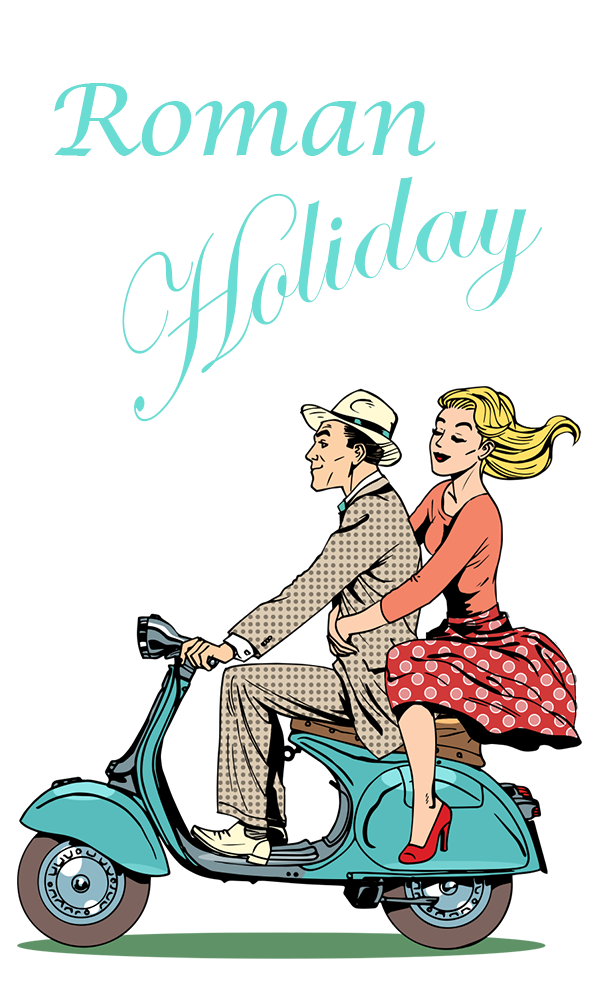
<style>
.page{position:relative;width:600px;height:1000px;background:#ffffff}
.page>*{position:absolute;margin:0}
.t1{font:100px "LucidaCalligraphy-Italic";color:#69dcd3}
.t2{font:180px "EdwardianScriptITC";color:#69dcd3}
</style>
<div class="page">
<p class="t1" style="left:54px;top:83px;width:382px;height:73px">Roman</p>
<p class="t2" style="left:122px;top:176px;width:420px;height:246px;rotate:-24deg">Holiday</p>
</div>
